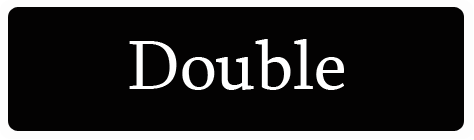
<style>
.page{position:relative;width:474px;height:140px;background:#030202}
.page>*{position:absolute;margin:0}
.t1{font:72px "Sylfaen";color:#ffffff}
</style>
<div class="page">
<p class="t1" style="left:129px;top:39px;width:215px;height:51px">Double</p>
</div>
